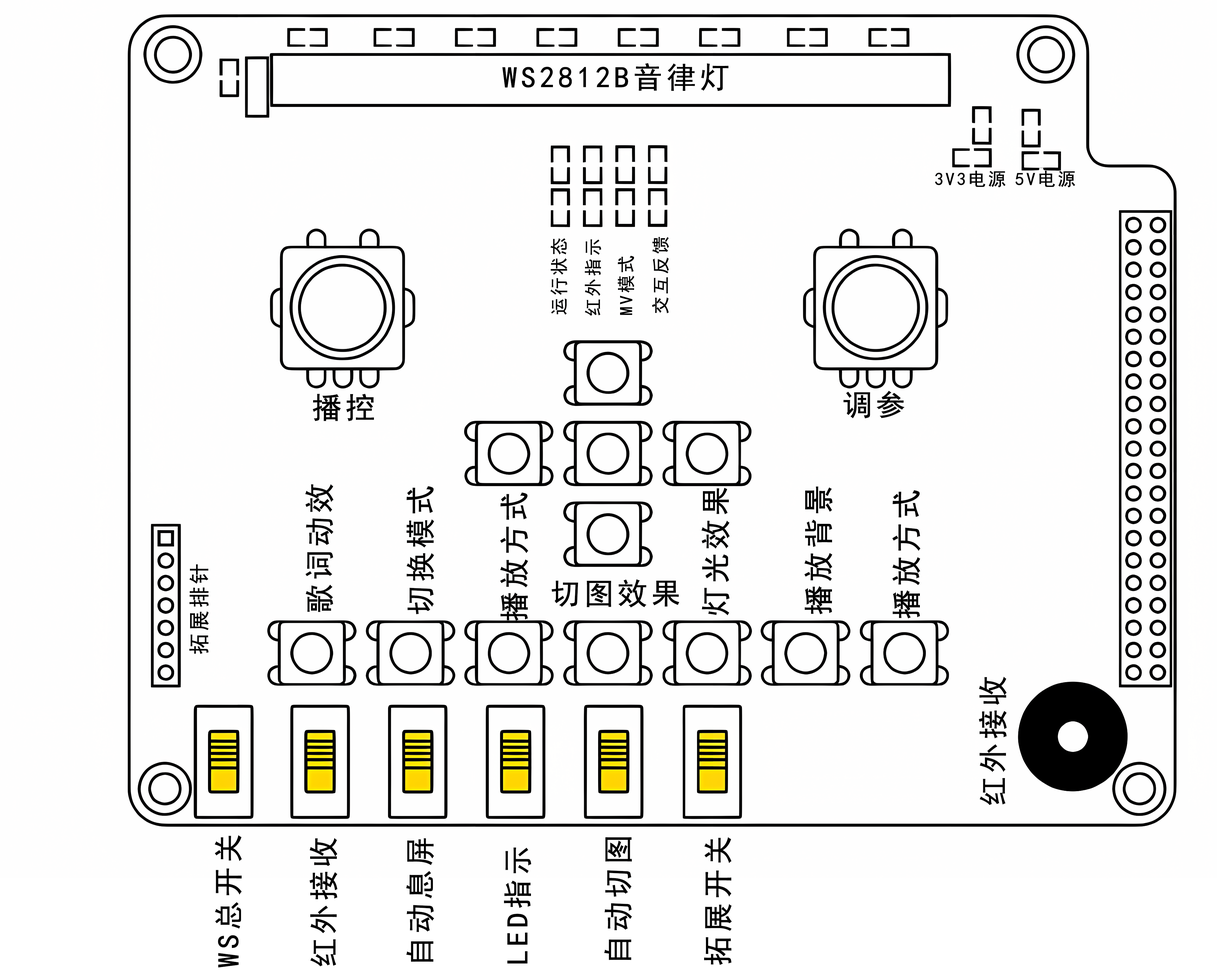
<style>
.page{position:relative;width:1217px;height:980px;background:#fefefe}
.page>*{position:absolute;margin:0}
.t1{font:29.7px "SimHei";letter-spacing:0.1em;color:#000000;font-weight:bold}
.t2{font:17.8px "SimHei";letter-spacing:0.1em;color:#000000;font-weight:bold}
.t3{font:20.8px "SimHei";letter-spacing:0.1em;color:#000000;font-weight:bold}
</style>
<div class="page">
<p class="t1" style="left:502px;top:63px;width:226px;height:28px">WS2812B音律灯</p>
<p class="t2" style="left:935px;top:170px;width:70px;height:17px">3V3电源</p>
<p class="t2" style="left:1015px;top:170px;width:60px;height:17px">5V电源</p>
<p class="t2" style="left:550px;top:238px;width:17px;height:77px;rotate:-90deg">运行状态</p>
<p class="t2" style="left:585px;top:239px;width:16px;height:77px;rotate:-90deg">红外指示</p>
<p class="t2" style="left:652px;top:237px;width:17px;height:76px;rotate:-90deg">交互反馈</p>
<p class="t2" style="left:617px;top:256px;width:17px;height:59px;rotate:-90deg">MV模式</p>
<p class="t1" style="left:312px;top:394px;width:62px;height:27px">播控</p>
<p class="t1" style="left:843px;top:391px;width:61px;height:27px">调参</p>
<p class="t1" style="left:305px;top:484px;width:29px;height:128px;rotate:-90deg">歌词动效</p>
<p class="t1" style="left:406px;top:486px;width:28px;height:128px;rotate:-90deg">切换模式</p>
<p class="t1" style="left:500px;top:492px;width:28px;height:129px;rotate:-90deg">播放方式</p>
<p class="t1" style="left:701px;top:488px;width:28px;height:127px;rotate:-90deg">灯光效果</p>
<p class="t1" style="left:804px;top:487px;width:28px;height:128px;rotate:-90deg">播放背景</p>
<p class="t1" style="left:892px;top:490px;width:28px;height:129px;rotate:-90deg">播放方式</p>
<p class="t3" style="left:189px;top:564px;width:20px;height:90px;rotate:-90deg">拓展排针</p>
<p class="t1" style="left:551px;top:579px;width:128px;height:29px">切图效果</p>
<p class="t1" style="left:978px;top:677px;width:28px;height:128px;rotate:-90deg">红外接收</p>
<p class="t1" style="left:215px;top:835px;width:27px;height:133px;rotate:-90deg">WS总开关</p>
<p class="t1" style="left:309px;top:838px;width:28px;height:128px;rotate:-90deg">红外接收</p>
<p class="t1" style="left:406px;top:838px;width:28px;height:124px;rotate:-90deg">自动息屏</p>
<p class="t1" style="left:604px;top:837px;width:28px;height:123px;rotate:-90deg">自动切图</p>
<p class="t1" style="left:704px;top:837px;width:28px;height:128px;rotate:-90deg">拓展开关</p>
<p class="t1" style="left:504px;top:848px;width:27px;height:116px;rotate:-90deg">LED指示</p>
</div>
